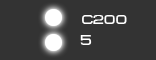
<style>
.page{position:relative;width:156px;height:60px;background:#333333}
.page>*{position:absolute;margin:0}
.t1{font:13px "MetroDF";color:#ffffff}
.t2{font:13.7px "MetroDF";color:#ffffff}
</style>
<div class="page">
<p class="t1" style="left:82px;top:15px;width:45px;height:9px">c200</p>
<p class="t2" style="left:80px;top:35px;width:12px;height:10px">5</p>
</div>
